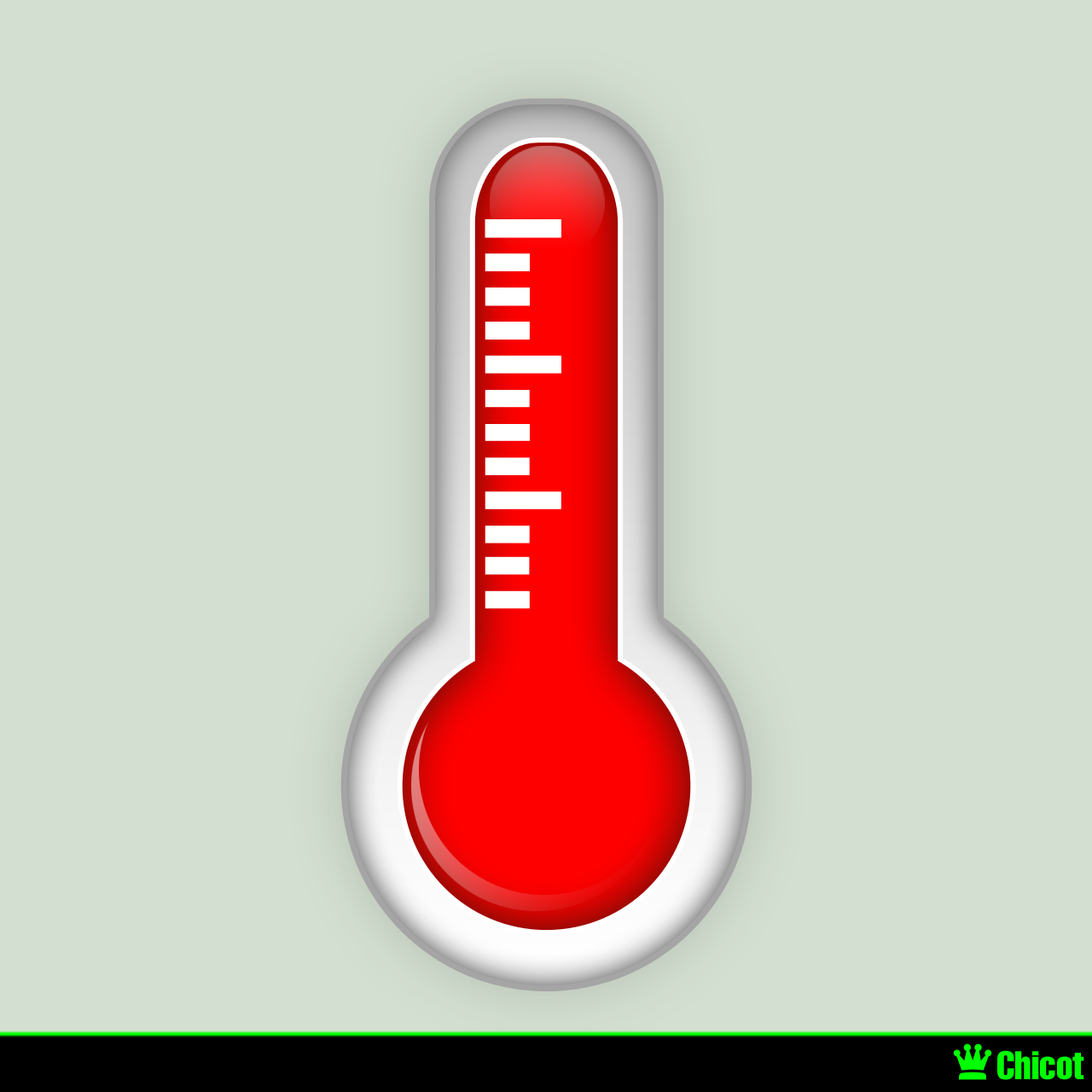
<style>
.page{position:relative;width:1092px;height:1092px;background:#d3dfd1}
.page>*{position:absolute;margin:0}
.t1{font:39.2px "HelveticaLTStd-Comp";color:#00ff00}
</style>
<div class="page">
<p class="t1" style="left:997px;top:1050px;width:87px;height:30px">Chicot</p>
</div>
